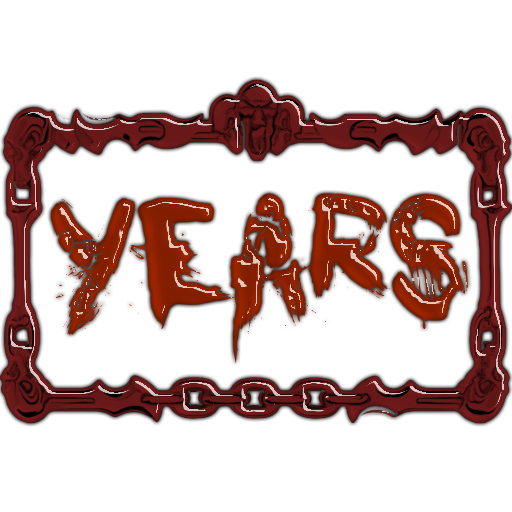
<style>
.page{position:relative;width:512px;height:512px;background:#ffffff}
.page>*{position:absolute;margin:0}
.t1{font:158px "Nightbird";color:#882000}
</style>
<div class="page">
<p class="t1" style="left:50px;top:193px;width:418px;height:171px">years</p>
</div>
